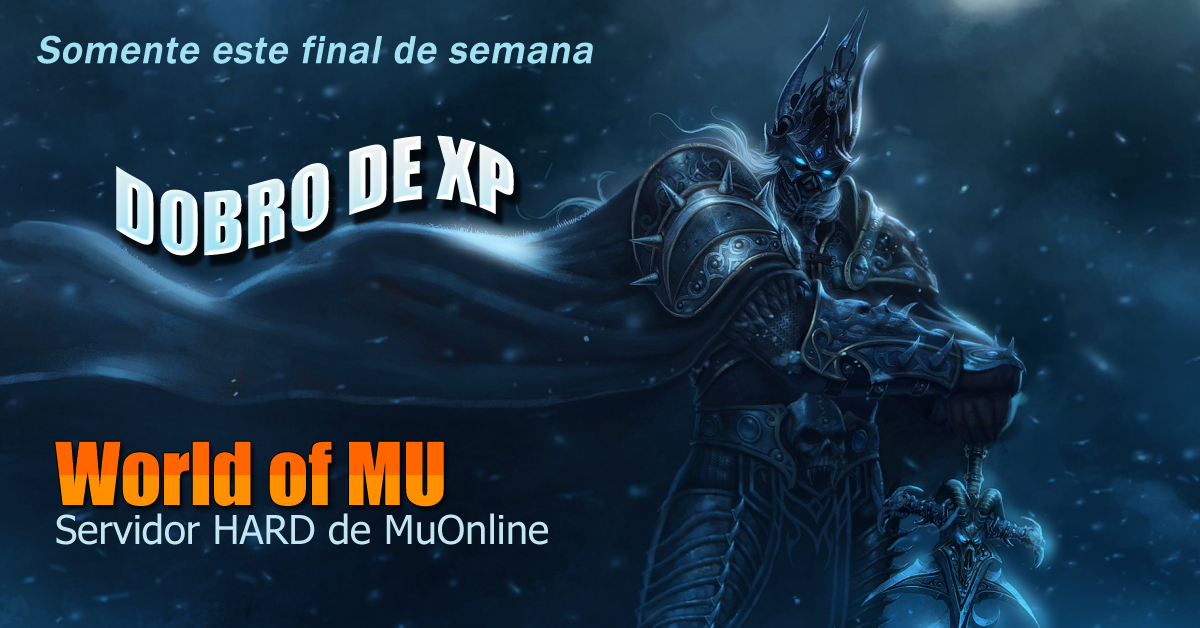
<style>
.page{position:relative;width:1200px;height:628px}
.page>*{position:absolute;margin:0}
.t1{font:40px "FranklinGothic-Medium";color:#a0dff1;font-weight:bold;font-style:italic}
.t2{font:80px "Impact"}
.t3{font:40px "Tahoma";color:#c3e6f1}
</style>
<div class="page">
<p class="t1" style="left:37px;top:35px;width:556px;height:29px">Somente este final de semana</p>
<p class="t2" style="left:116px;top:135px;width:398px;height:121px">DOBRO DE XP</p>
<p class="t2" style="left:55px;top:441px;width:389px;height:66px">World of MU</p>
<p class="t3" style="left:56px;top:513px;width:492px;height:32px">Servidor HARD de MuOnline</p>
</div>
